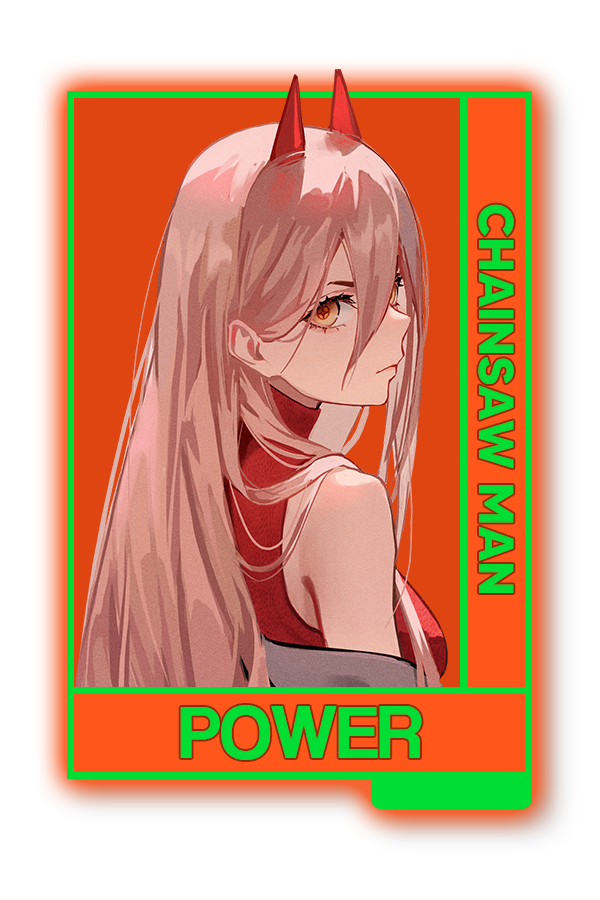
<style>
.page{position:relative;width:600px;height:900px;background:#ffffff}
.page>*{position:absolute;margin:0}
.t1{font:48.8px "MADETOMMY-Bold";color:#00dd35}
.t2{font:76.6px "CoolveticaRg-Regular";color:#00dd35}
</style>
<div class="page">
<p class="t1" style="left:478px;top:204px;width:36px;height:389px;rotate:90deg">CHAINSAW MAN</p>
<p class="t2" style="left:180px;top:705px;width:242px;height:55px">POWER</p>
</div>
